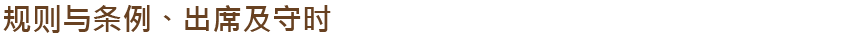
<style>
.page{position:relative;width:868px;height:38px;background:#ffffff}
.page>*{position:absolute;margin:0}
.t1{font:30px "MicrosoftJhengHeiBold";color:#684121}
</style>
<div class="page">
<p class="t1" style="left:3px;top:5px;width:328px;height:28px">规则与条例、出席及守时</p>
</div>
